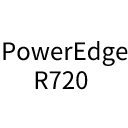
<style>
.page{position:relative;width:128px;height:128px;background:#ffffff}
.page>*{position:absolute;margin:0}
.t1{font:24px "SourceHanSansSC-Regular";color:#000000}
</style>
<div class="page">
<p class="t1" style="left:3px;top:40px;width:125px;height:50px">PowerEdge<br>      R720</p>
</div>
